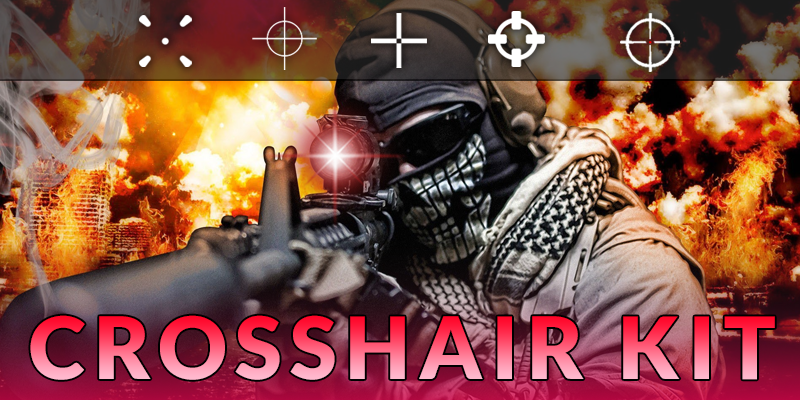
<style>
.page{position:relative;width:800px;height:400px}
.page>*{position:absolute;margin:0}
.t1{font:86px "Lato-Black";letter-spacing:0.1em;text-transform:uppercase}
</style>
<div class="page">
<p class="t1" style="left:30px;top:315px;width:745px;height:65px">crosshair kit</p>
</div>
